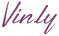
<style>
.page{position:relative;width:59px;height:36px;background:#ffffff}
.page>*{position:absolute;margin:0}
.t1{font:47.6px "Strikeyour-Path";color:#773366}
</style>
<div class="page">
<p class="t1" style="left:2px;top:1px;width:55px;height:33px">Vin.ly</p>
</div>
